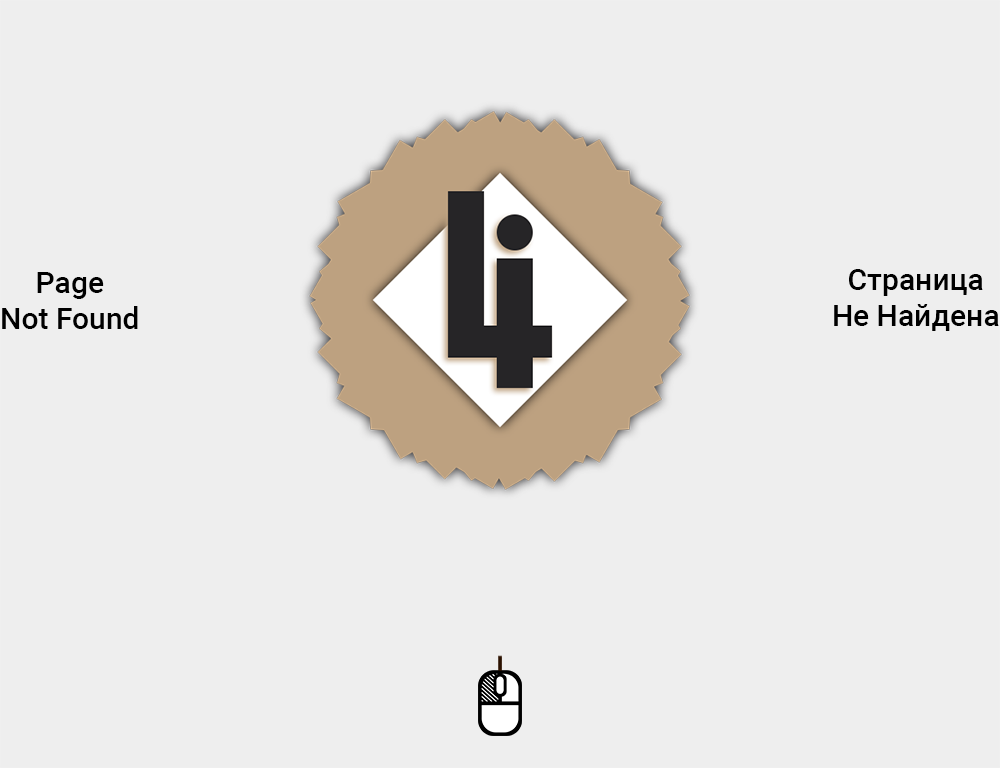
<style>
.page{position:relative;width:1000px;height:768px;background:#eeeeee}
.page>*{position:absolute;margin:0}
.t1{font:30px "Roboto-Medium";color:#000000}
</style>
<div class="page">
<p class="t1" style="left:834px;top:269px;width:165px;height:62px;text-align:center">Страница<br>Не Найдена</p>
<p class="t1" style="left:2px;top:272px;width:136px;height:57px;text-align:center">Page<br>Not Found</p>
</div>
